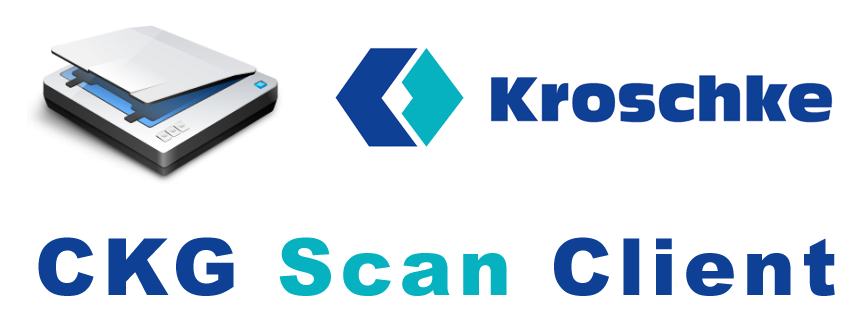
<style>
.page{position:relative;width:865px;height:322px;background:#ffffff}
.page>*{position:absolute;margin:0}
.t1{font:79.1px "Arial-Black";letter-spacing:0.08em;color:#0e4095}
.t2{font:79.1px "Arial-Black";letter-spacing:0.08em;color:#06b2c0}
</style>
<div class="page">
<p class="t1" style="left:38px;top:237px;width:797px;height:59px">CKG <span class="t2">Scan </span>Client</p>
</div>
